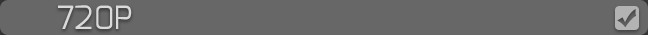
<style>
.page{position:relative;width:648px;height:35px;background:#676767}
.page>*{position:absolute;margin:0}
.t1{font:32px "Exo-Regular";color:#d9d9d9;text-transform:uppercase}
</style>
<div class="page">
<p class="t1" style="left:58px;top:5px;width:74px;height:24px">720p</p>
</div>
